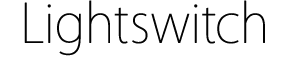
<style>
.page{position:relative;width:291px;height:59px;background:#ffffff}
.page>*{position:absolute;margin:0}
.t1{font:59px "MyriadSetPro-Ultralight";color:#030303;font-weight:bold}
</style>
<div class="page">
<p class="t1" style="left:24px;top:0px;width:241px;height:56px">Lightswitch</p>
</div>
